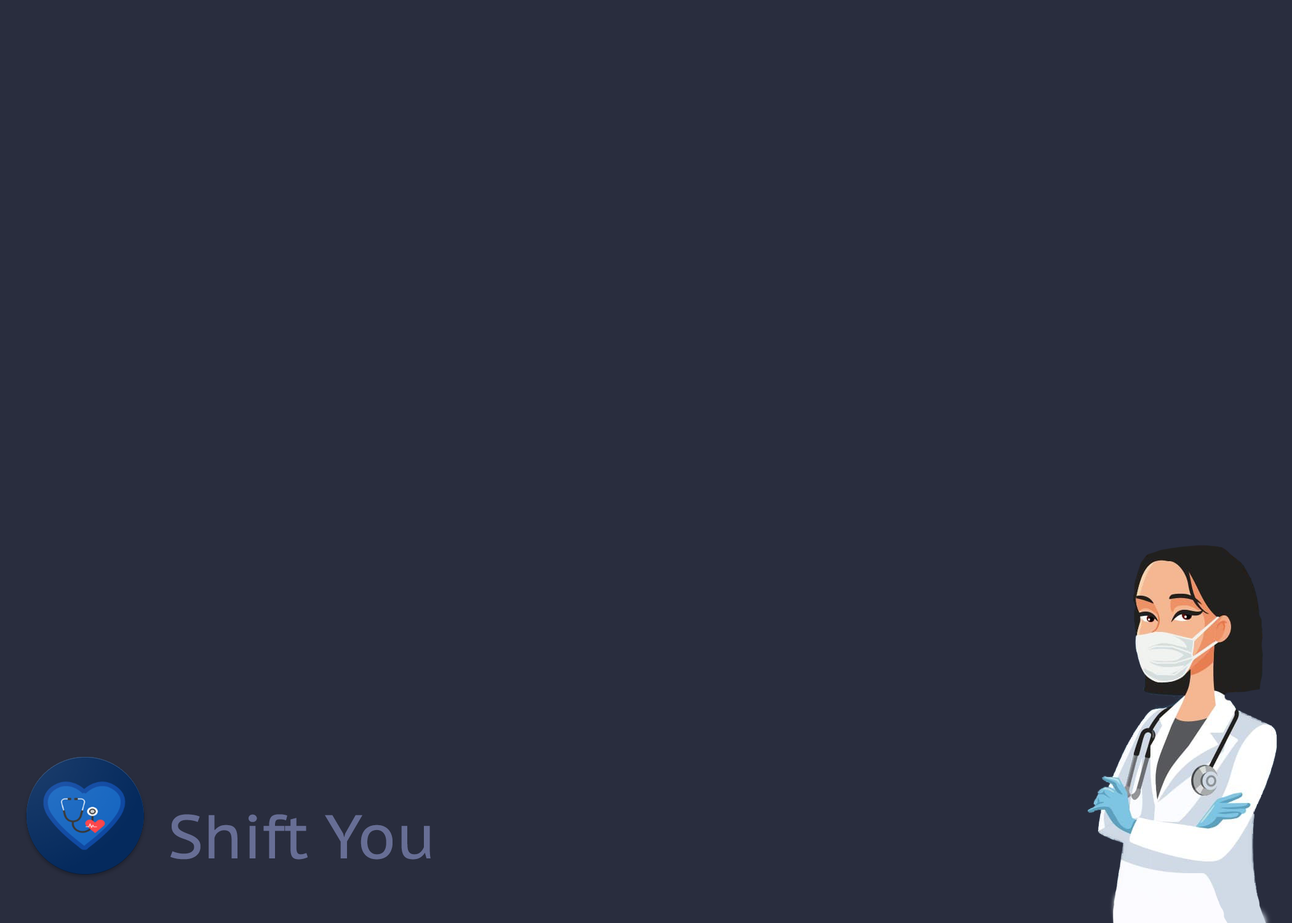
<style>
.page{position:relative;width:1292px;height:923px;background:#292d3e}
.page>*{position:absolute;margin:0}
.t1{font:61.5px "PTSans-Caption";color:#676e95}
</style>
<div class="page">
<p class="t1" style="left:170px;top:814px;width:261px;height:46px">Shift You</p>
</div>
